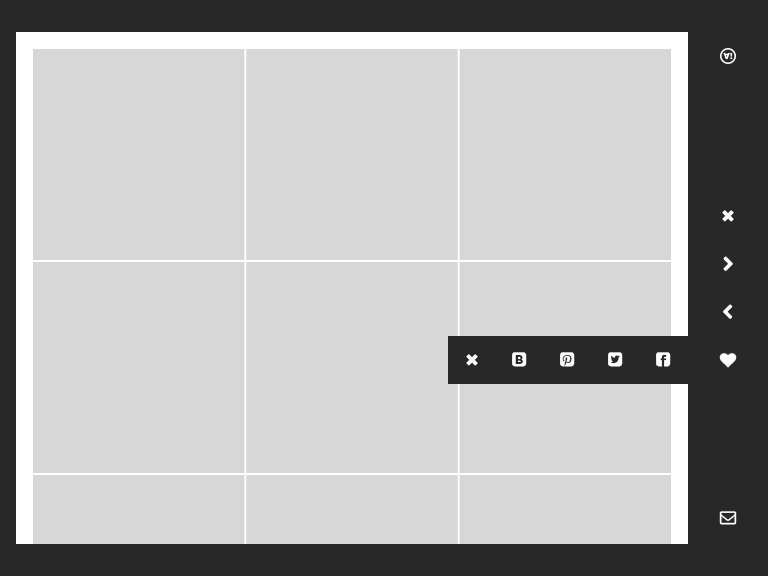
<style>
.page{position:relative;width:768px;height:576px;background:#d7d7d7}
.page>*{position:absolute;margin:0}
.t1{font:12px "HelveticaNeueCyr-Heavy";color:#282828}
</style>
<div class="page">
<p class="t1" style="left:515px;top:355px;width:8px;height:9px">В</p>
</div>
